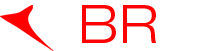
<style>
.page{position:relative;width:206px;height:51px;background:#ffffff}
.page>*{position:absolute;margin:0}
.t1{font:52.6px "HelveticaNeueLTPro-LtEx";color:#ff0000;text-transform:uppercase}
</style>
<div class="page">
<p class="t1" style="left:82px;top:5px;width:75px;height:38px">br</p>
</div>
